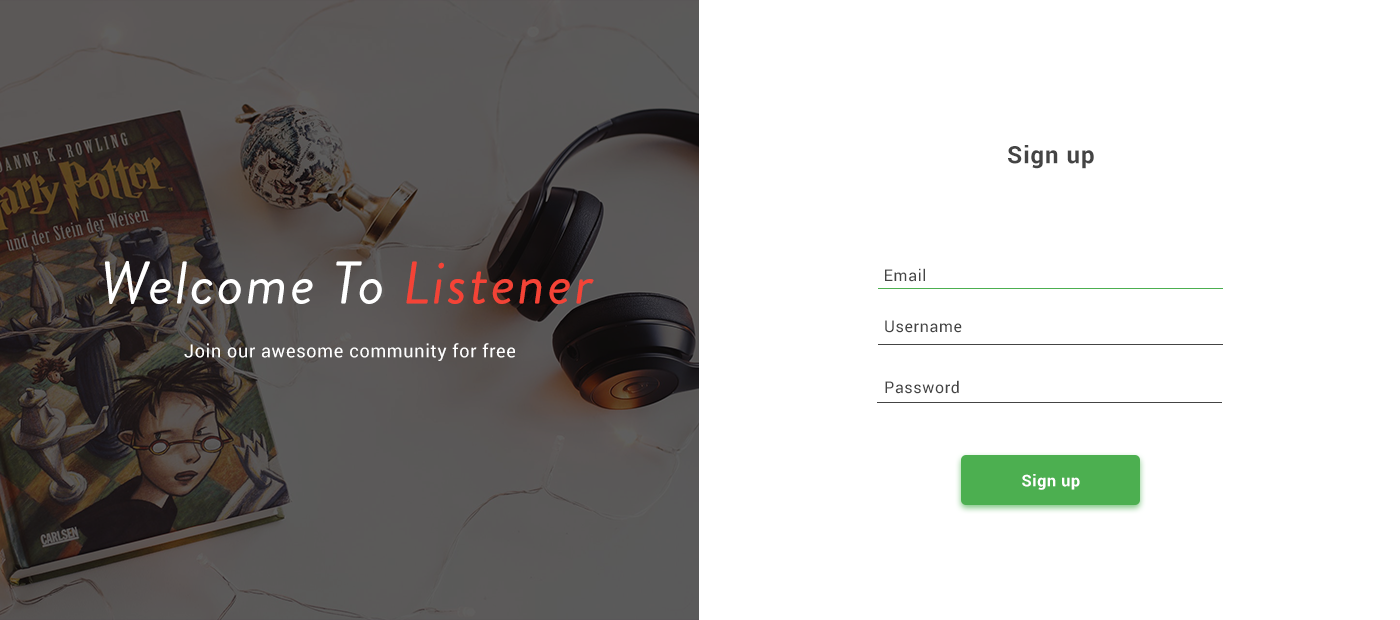
<style>
.page{position:relative;width:1400px;height:620px;background:#ffffff}
.page>*{position:absolute;margin:0}
.t1{font:24px "Roboto-Bold";letter-spacing:0.04em;color:#444444}
.t2{font:60px "BrandonGrotesque-RegularItalic";letter-spacing:0.04em;color:#ffffff}
.t3{font:60px "BrandonGrotesque-RegularItalic";letter-spacing:0.04em;color:#f44336}
.t4{font:16px "Roboto-Regular";letter-spacing:0.04em;color:#444444}
.t5{font:18px "Roboto-Regular";letter-spacing:0.04em;color:#ffffff}
.t6{font:16px "Roboto-Bold";letter-spacing:0.04em;color:#ffffff}
</style>
<div class="page">
<p class="t1" style="left:1008px;top:145px;width:86px;height:24px">Sign up</p>
<p class="t2" style="left:105px;top:261px;width:489px;height:43px">Welcome To <span class="t3">Listener</span></p>
<p class="t4" style="left:885px;top:268px;width:40px;height:14px">Email</p>
<p class="t4" style="left:885px;top:320px;width:77px;height:13px">Username</p>
<p class="t5" style="left:184px;top:343px;width:331px;height:18px">Join our awesome community for free</p>
<p class="t4" style="left:885px;top:380px;width:74px;height:14px">Password</p>
<p class="t6" style="left:1022px;top:474px;width:58px;height:16px">Sign up</p>
</div>
